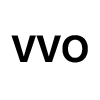
<style>
.page{position:relative;width:100px;height:100px;background:#ffffff}
.page>*{position:absolute;margin:0}
.t1{font:37.5px "SFProDisplay-Bold";color:#000000}
</style>
<div class="page">
<p class="t1" style="left:11px;top:35px;width:77px;height:28px">VVO</p>
</div>
